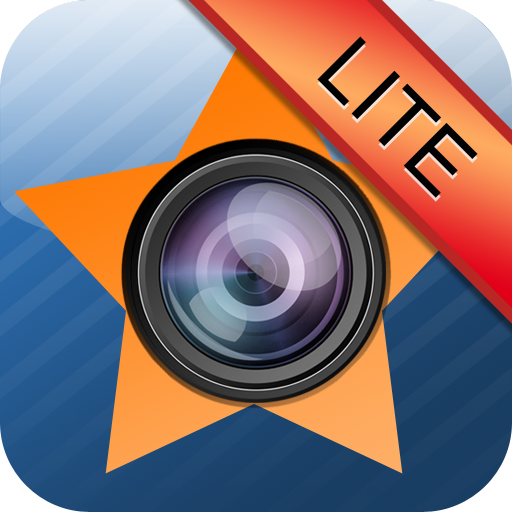
<style>
.page{position:relative;width:512px;height:512px}
.page>*{position:absolute;margin:0}
.t1{font:84.4px "ArialMT";color:#010201}
</style>
<div class="page">
<p class="t1" style="left:317px;top:36px;width:161px;height:162px;rotate:45deg">LITE</p>
</div>
